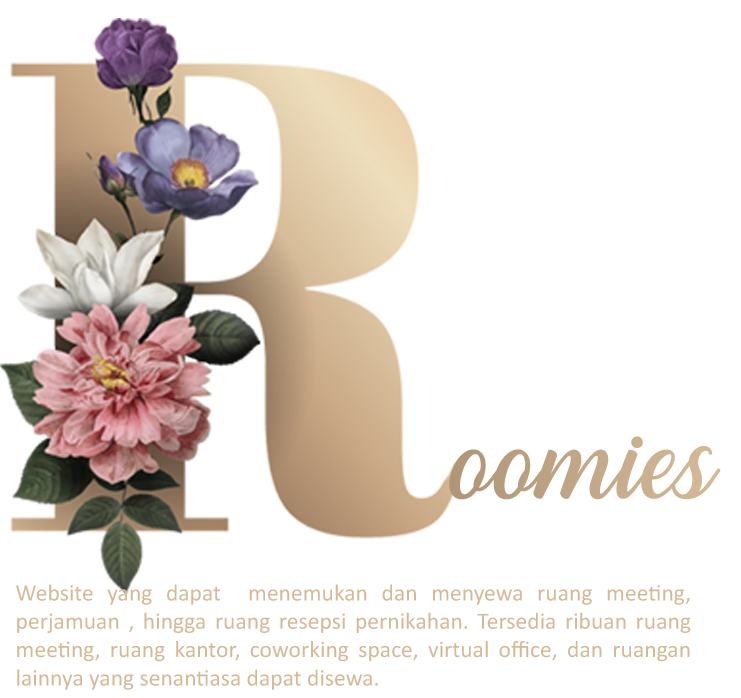
<style>
.page{position:relative;width:741px;height:698px;background:#ffffff}
.page>*{position:absolute;margin:0}
.t1{font:97px "Hestina";color:#d5b996}
.t2{font:23.6px "Calibri";color:#d5b996}
</style>
<div class="page">
<p class="t1" style="left:449px;top:436px;width:272px;height:64px">oomies</p>
<p class="t2" style="left:16px;top:584px;width:675px;height:106px;text-align:justify">Website yang dapat  menemukan dan menyewa ruang meeting, perjamuan , hingga ruang resepsi pernikahan. Tersedia ribuan ruang meeting, ruang kantor, coworking space, virtual office, dan ruangan lainnya yang senantiasa dapat disewa.</p>
</div>
